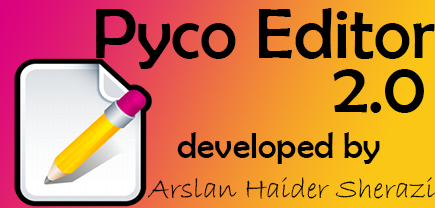
<style>
.page{position:relative;width:435px;height:208px}
.page>*{position:absolute;margin:0}
.t1{font:72px "BerlinSansFB-Reg";color:#000000}
.t2{font:36px "BerlinSansFB-Reg";color:#000000}
.t3{font:30px "BradleyHandITC";color:#000000}
</style>
<div class="page">
<p class="t1" style="left:96px;top:8px;width:339px;height:61px">Pyco Editor</p>
<p class="t1" style="left:333px;top:69px;width:91px;height:44px">2.0</p>
<p class="t2" style="left:177px;top:132px;width:203px;height:32px">developed by</p>
<p class="t3" style="left:147px;top:177px;width:288px;height:22px">Arslan Haider Sherazi</p>
</div>
